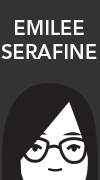
<style>
.page{position:relative;width:100px;height:180px;background:#333333}
.page>*{position:absolute;margin:0}
.t1{font:20px "AvenirLTStd-Heavy";color:#f9f8f7}
</style>
<div class="page">
<p class="t1" style="left:1px;top:20px;width:96px;height:39px;text-align:center">EMILEE<br>SERAFINE</p>
</div>
